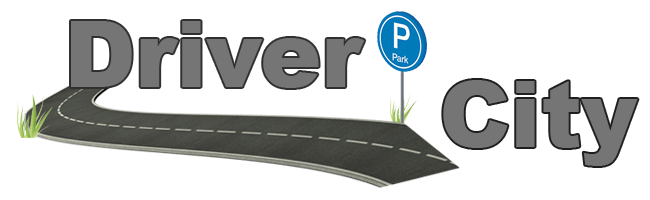
<style>
.page{position:relative;width:650px;height:200px;background:#ffffff}
.page>*{position:absolute;margin:0}
.t1{font:91.7px "Arial-Black";color:#757575}
</style>
<div class="page">
<p class="t1" style="left:71px;top:21px;width:294px;height:67px">Driver</p>
<p class="t1" style="left:443px;top:80px;width:195px;height:86px">City</p>
</div>
